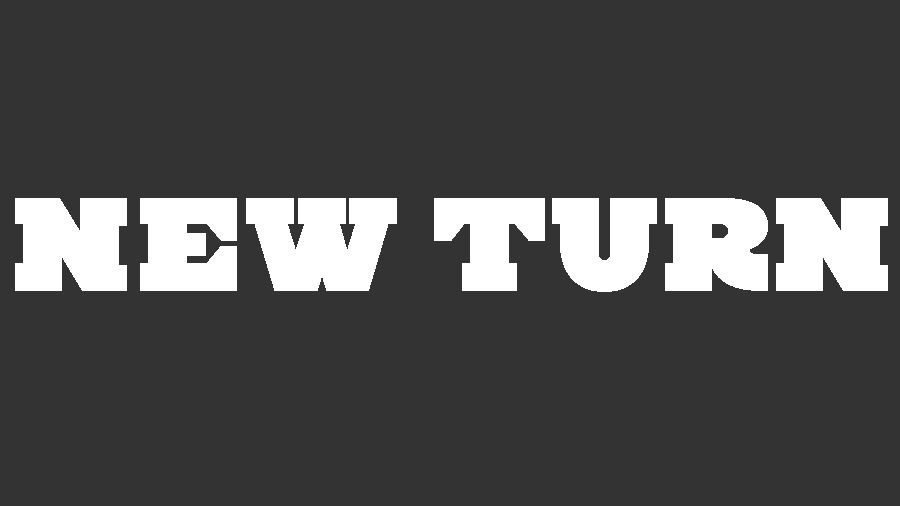
<style>
.page{position:relative;width:900px;height:506px;background:#333333}
.page>*{position:absolute;margin:0}
.t1{font:127.6px "Steampunk-Regular";color:#ffffff}
</style>
<div class="page">
<p class="t1" style="left:15px;top:198px;width:873px;height:94px">NEW TURN</p>
</div>
